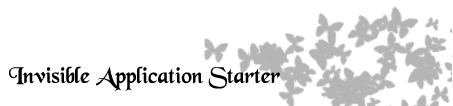
<style>
.page{position:relative;width:453px;height:106px;background:#ffffff}
.page>*{position:absolute;margin:0}
.t1{font:24px "BlackChancery";color:#000000}
</style>
<div class="page">
<p class="t1" style="left:9px;top:66px;width:271px;height:25px">Invisible Application Starter</p>
</div>
